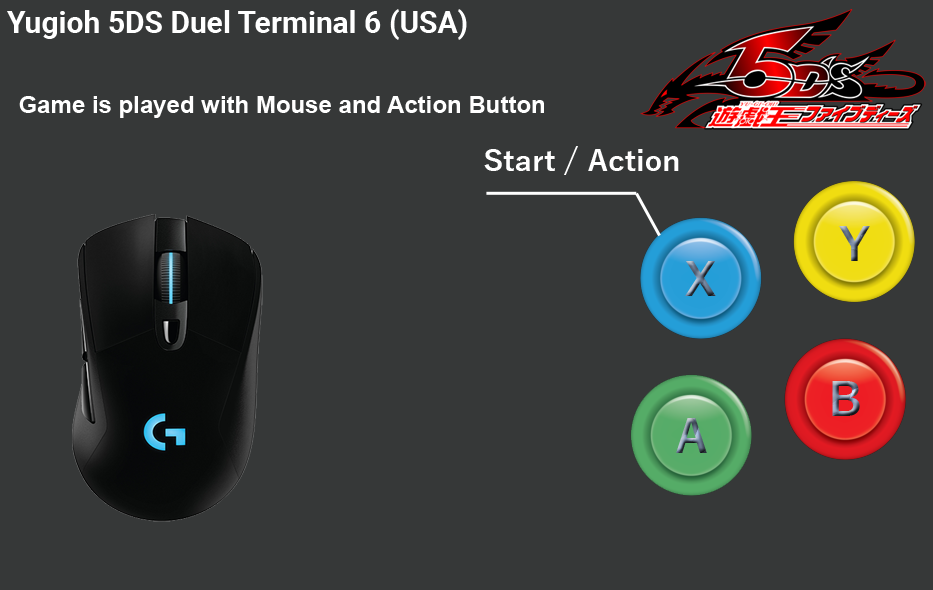
<style>
.page{position:relative;width:933px;height:590px;background:#363838}
.page>*{position:absolute;margin:0}
.t1{font:30px "Roboto-Bold";color:#ffffff}
.t2{font:24px "Arial-BoldMT";color:#ffffff}
.t3{font:30px "YuGothic-Bold";color:#ffffff}
</style>
<div class="page">
<p class="t1" style="left:7px;top:9px;width:460px;height:31px">Yugioh 5DS Duel Terminal 6 (USA)</p>
<p class="t2" style="left:19px;top:96px;width:525px;height:22px">Game is played with Mouse and Action Button</p>
<p class="t3" style="left:484px;top:146px;width:195px;height:29px">Start / Action</p>
</div>
